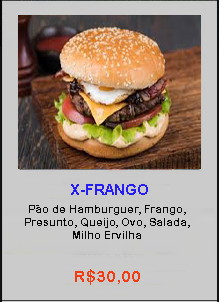
<style>
.page{position:relative;width:219px;height:302px;background:#cbcbcb}
.page>*{position:absolute;margin:0}
.t1{font:14.7px "Arial-BoldMT";color:#261cf4}
.t2{font:10.7px "ArialRoundedMTBold";color:#090909}
.t3{font:16px "ArialRoundedMTBold";color:#f33c12}
</style>
<div class="page">
<p class="t1" style="left:71px;top:184px;width:77px;height:11px">X-FRANGO</p>
<p class="t2" style="left:25px;top:205px;width:165px;height:34px;text-align:center">Pão de Hamburguer, Frango, Presunto, Queijo, Ovo, Salada, Milho Ervilha</p>
<p class="t3" style="left:75px;top:269px;width:65px;height:16px">R$30,00</p>
</div>
